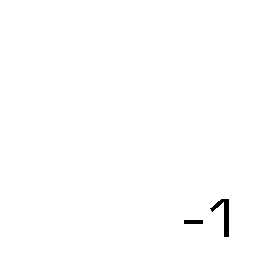
<style>
.page{position:relative;width:256px;height:256px;background:#ffffff}
.page>*{position:absolute;margin:0}
.t1{font:50.9px "Michroma";color:#000000}
</style>
<div class="page">
<p class="t1" style="left:184px;top:199px;width:45px;height:38px">-1</p>
</div>
